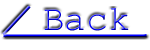
<style>
.page{position:relative;width:150px;height:50px;background:#ffffff}
.page>*{position:absolute;margin:0}
.t1{font:35.9px "CourierNewPSMT"}
</style>
<div class="page">
<p class="t1" style="left:44px;top:8px;width:85px;height:23px">Back</p>
</div>
